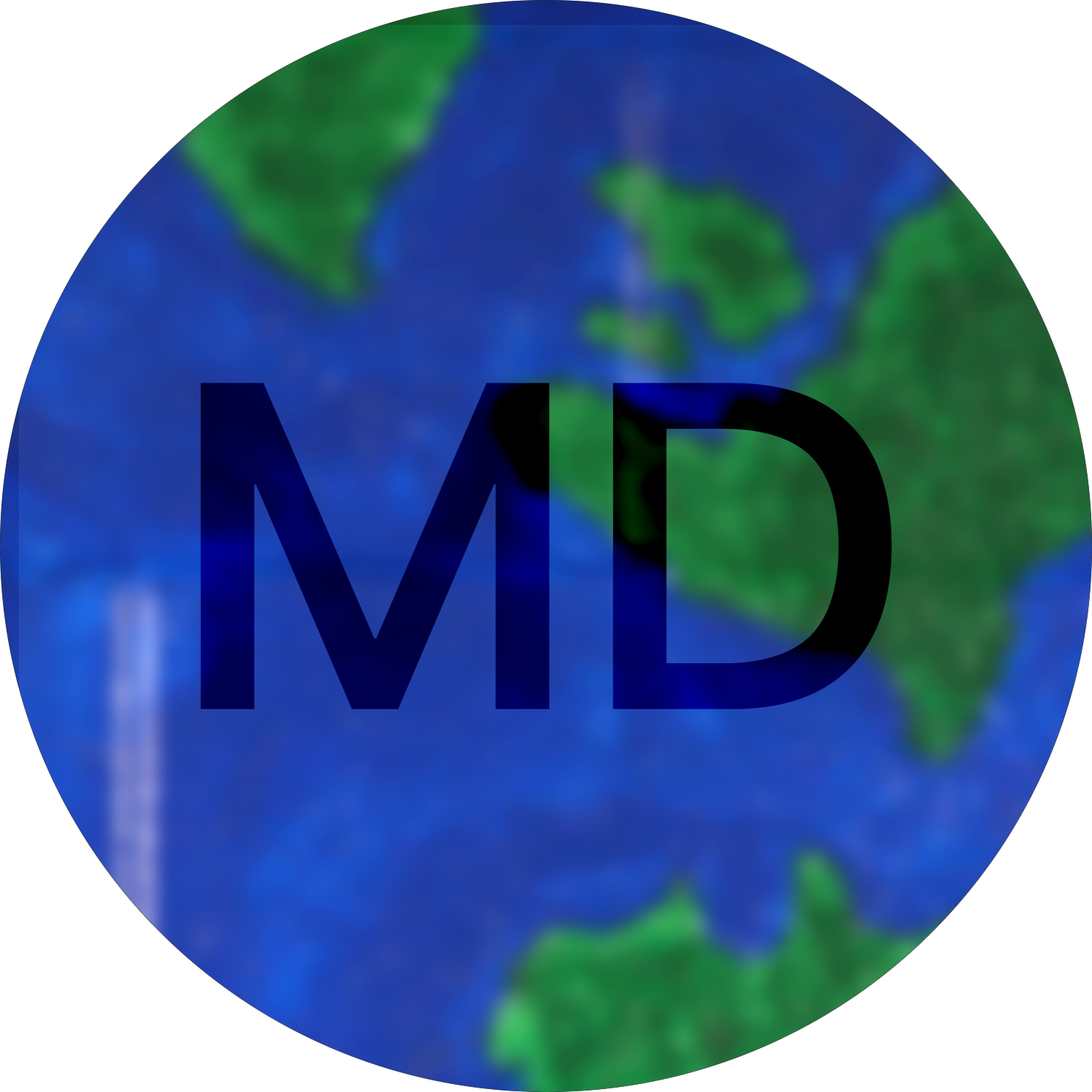
<style>
.page{position:relative;width:1092px;height:1092px;background:#ffffff}
.page>*{position:absolute;margin:0}
.t1{font:456.5px "PingFangHK-Semibold"}
</style>
<div class="page">
<p class="t1" style="left:200px;top:383px;width:692px;height:326px">MD</p>
</div>
